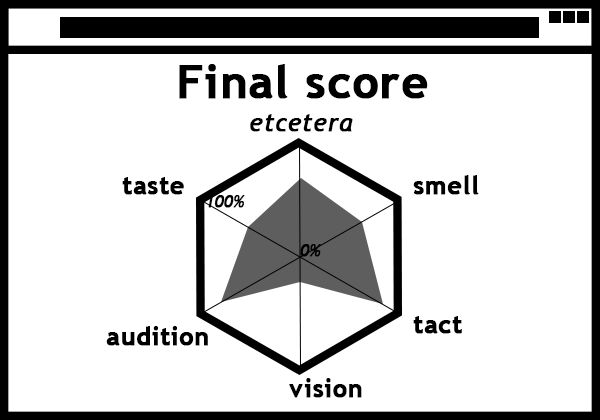
<style>
.page{position:relative;width:600px;height:420px;background:#ffffff}
.page>*{position:absolute;margin:0}
.t1{font:45.9px "TrebuchetMS-Bold";letter-spacing:0.01em;color:#000000;font-weight:bold}
.t2{font:25px "TrebuchetMS-Italic";letter-spacing:0.01em;color:#000000;font-weight:bold}
.t3{font:25px "TrebuchetMS-Bold";letter-spacing:0.01em;color:#000000;font-weight:bold}
.t4{font:16.7px "TrebuchetMS-Italic";letter-spacing:0.01em;color:#000000;font-weight:bold}
</style>
<div class="page">
<p class="t1" style="left:179px;top:64px;width:249px;height:35px">Final score</p>
<p class="t2" style="left:250px;top:114px;width:103px;height:18px">etcetera</p>
<p class="t3" style="left:122px;top:177px;width:62px;height:18px">taste</p>
<p class="t3" style="left:413px;top:175px;width:66px;height:20px">smell</p>
<p class="t4" style="left:207px;top:195px;width:38px;height:13px">100%</p>
<p class="t4" style="left:300px;top:244px;width:21px;height:13px">0%</p>
<p class="t3" style="left:413px;top:316px;width:49px;height:18px">tact</p>
<p class="t3" style="left:106px;top:326px;width:102px;height:20px">audition</p>
<p class="t3" style="left:289px;top:378px;width:73px;height:20px">vision</p>
</div>
